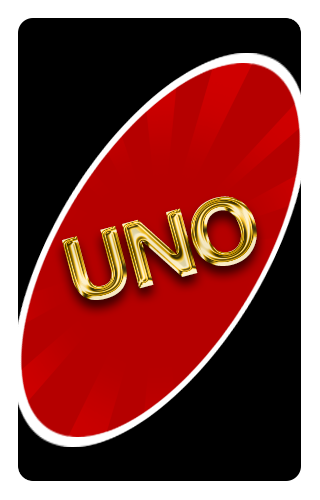
<style>
.page{position:relative;width:320px;height:500px;background:#000000}
.page>*{position:absolute;margin:0}
.t1{font:94.4px "SegoeUI-Bold";letter-spacing:-0.1em;font-weight:bold}
</style>
<div class="page">
<p class="t1" style="left:62px;top:196px;width:195px;height:104px;rotate:-15deg">UNO</p>
</div>
